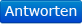
<style>
.page{position:relative;width:82px;height:25px}
.page>*{position:absolute;margin:0}
.t1{font:14px "Verdana";color:#f6f5fa}
</style>
<div class="page">
<p class="t1" style="left:4px;top:6px;width:73px;height:10px">Antworten</p>
</div>
